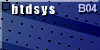
<style>
.page{position:relative;width:100px;height:50px}
.page>*{position:absolute;margin:0}
.t1{font:12.3px "Impact";letter-spacing:0.1em;color:#ffffff;scale:1.09 1}
.t2{font:11px "Arial-BoldMT";letter-spacing:-0.05em;color:#d0d7ff}
</style>
<div class="page">
<p class="t1" style="left:12px;top:4px;width:43px;height:12px">btdsys</p>
<p class="t2" style="left:78px;top:4px;width:19px;height:8px">B04</p>
</div>
